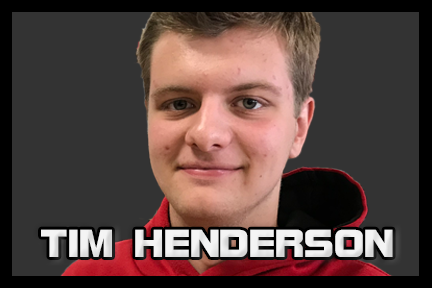
<style>
.page{position:relative;width:432px;height:288px;background:#333333}
.page>*{position:absolute;margin:0}
.t1{font:41.7px "BolsterBold";color:#f3f3f3}
</style>
<div class="page">
<p class="t1" style="left:41px;top:229px;width:352px;height:28px">TIM HENDERSON</p>
</div>
